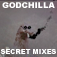
<style>
.page{position:relative;width:57px;height:57px}
.page>*{position:absolute;margin:0}
.t1{font:8px "Arial-Black";color:#ffffff}
.t2{font:6.7px "Arial-Black";color:#ffffff}
</style>
<div class="page">
<p class="t1" style="left:2px;top:2px;width:53px;height:6px">GODCHILLA</p>
<p class="t2" style="left:0px;top:49px;width:56px;height:5px">SECRET MIXES</p>
</div>
